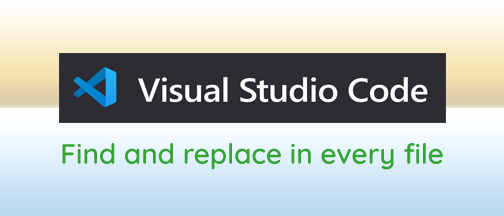
<style>
.page{position:relative;width:504px;height:216px}
.page>*{position:absolute;margin:0}
.t1{font:28px "Quicksand-SemiBold";color:#34a534}
</style>
<div class="page">
<p class="t1" style="left:62px;top:143px;width:381px;height:27px">Find and replace in every file</p>
</div>
